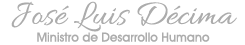
<style>
.page{position:relative;width:245px;height:45px;background:#ffffff}
.page>*{position:absolute;margin:0}
.t1{font:36px "Allura-Regular";color:#acacac}
.t2{font:12.5px "AvantGardeITCbyBT-Medium";color:#acacac}
</style>
<div class="page">
<p class="t1" style="left:11px;top:1px;width:226px;height:31px">José Luis Décima</p>
<p class="t2" style="left:37px;top:32px;width:173px;height:10px">Ministro de Desarrollo Humano</p>
</div>
